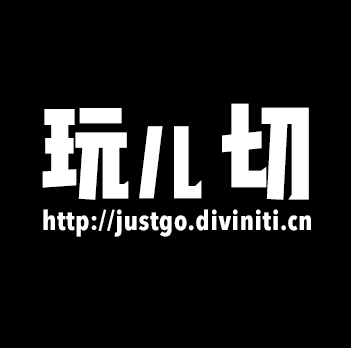
<style>
.page{position:relative;width:351px;height:348px;background:#000000}
.page>*{position:absolute;margin:0}
.t1{font:107.6px "WenYue-XinQingNianTi-NC-W8";color:#ffffff}
.t2{font:85.6px "WenYue-XinQingNianTi-NC-W8";color:#ffffff}
.t3{font:27px "WenYue-XinQingNianTi-NC-W8";color:#ffffff}
</style>
<div class="page">
<p class="t1" style="left:42px;top:103px;width:267px;height:97px">玩<span class="t2">儿 </span>切</p>
<p class="t3" style="left:43px;top:209px;width:268px;height:28px">http://justgo.diviniti.cn</p>
</div>
